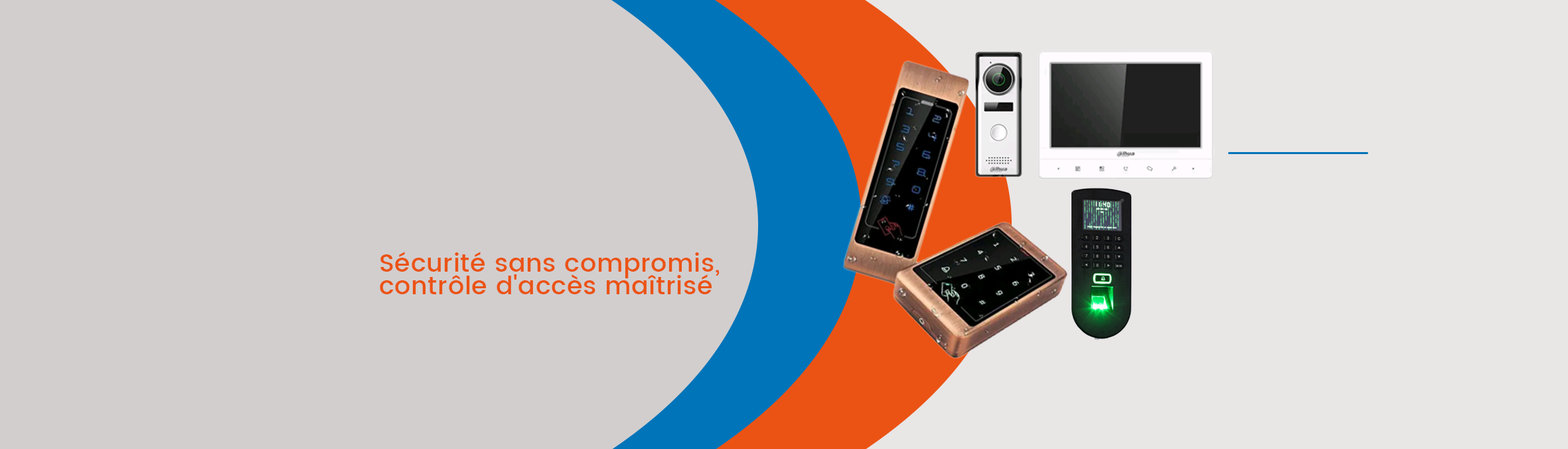
<style>
.page{position:relative;width:1568px;height:449px;background:#d2cece}
.page>*{position:absolute;margin:0}
.t1{font:24.9px/22.1px "Poppins-Medium";letter-spacing:0.025em;color:#eb5314}
</style>
<div class="page">
<p class="t1" style="left:380px;top:252px;width:340px;height:42px">Sécurité sans compromis, <br>contrôle d'accès maîtrisé</p>
</div>
